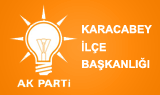
<style>
.page{position:relative;width:160px;height:95px}
.page>*{position:absolute;margin:0}
.t1{font:11px "Arial-BoldMT";color:#ffffff}
</style>
<div class="page">
<p class="t1" style="left:82px;top:25px;width:70px;height:9px">KARACABEY</p>
<p class="t1" style="left:82px;top:40px;width:24px;height:14px">İLÇE</p>
<p class="t1" style="left:82px;top:57px;width:68px;height:14px">BAŞKANLIĞI</p>
</div>
